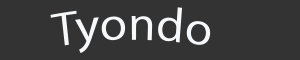
<style>
.page{position:relative;width:300px;height:60px;background:#333333}
.page>*{position:absolute;margin:0}
.t1{font:48px "MyriadPro-Regular";color:#f6f8fa}
</style>
<div class="page">
<p class="t1" style="left:50px;top:7px;width:161px;height:46px">Tyondo</p>
</div>
